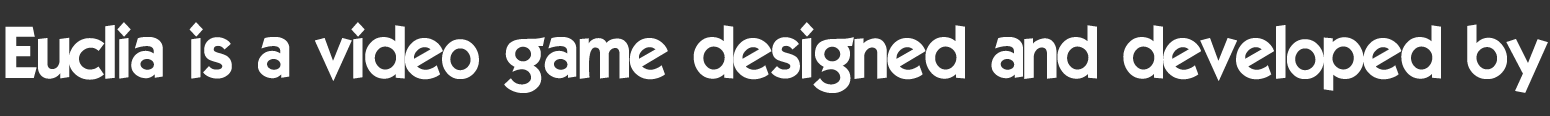
<style>
.page{position:relative;width:1550px;height:116px;background:#333333}
.page>*{position:absolute;margin:0}
.t1{font:72px "ELEGANCE";color:#ffffff}
</style>
<div class="page">
<p class="t1" style="left:5px;top:22px;width:1543px;height:71px">Euclia is a video game designed and developed by</p>
</div>
